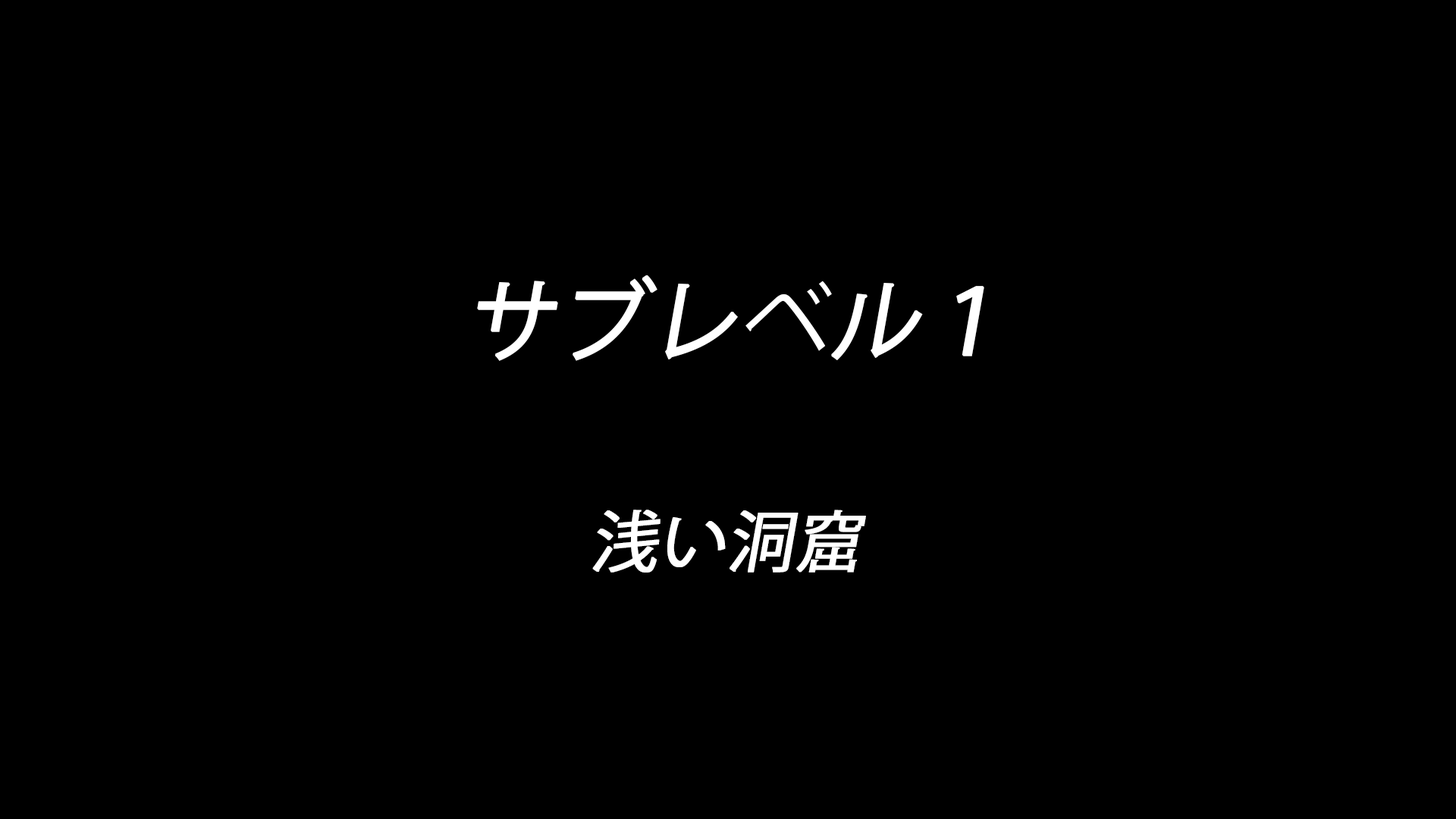
<style>
.page{position:relative;width:1456px;height:819px;background:#000000}
.page>*{position:absolute;margin:0}
.t1{font:88.5px "KozGoPr6N-Regular";color:#ffffff;font-weight:bold;font-style:italic}
.t2{font:66.4px "KozGoPr6N-Regular";color:#ffffff;font-weight:bold;font-style:italic}
</style>
<div class="page">
<p class="t1" style="left:477px;top:275px;width:507px;height:86px">サブレベル１</p>
<p class="t2" style="left:592px;top:510px;width:274px;height:63px">浅い洞窟</p>
</div>
